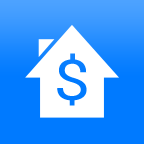
<style>
.page{position:relative;width:144px;height:144px;background:#007aff}
.page>*{position:absolute;margin:0}
.t1{font:56.1px "Roboto-Regular";color:#007aff;scale:1.15 1}
</style>
<div class="page">
<p class="t1" style="left:57px;top:53px;width:30px;height:53px">$</p>
</div>
